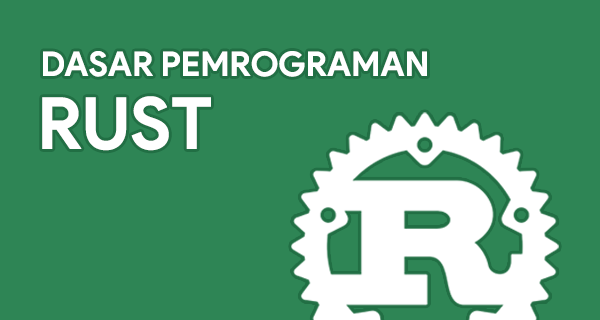
<style>
.page{position:relative;width:600px;height:320px;background:#2e8555}
.page>*{position:absolute;margin:0}
.t1{font:34px "ProductSans-Bold";color:#ffffff}
.t2{font:72px "ProductSans-Bold";color:#ffffff}
</style>
<div class="page">
<p class="t1" style="left:43px;top:51px;width:384px;height:26px">DASAR PEMROGRAMAN</p>
<p class="t2" style="left:42px;top:96px;width:169px;height:55px">RUST</p>
</div>
